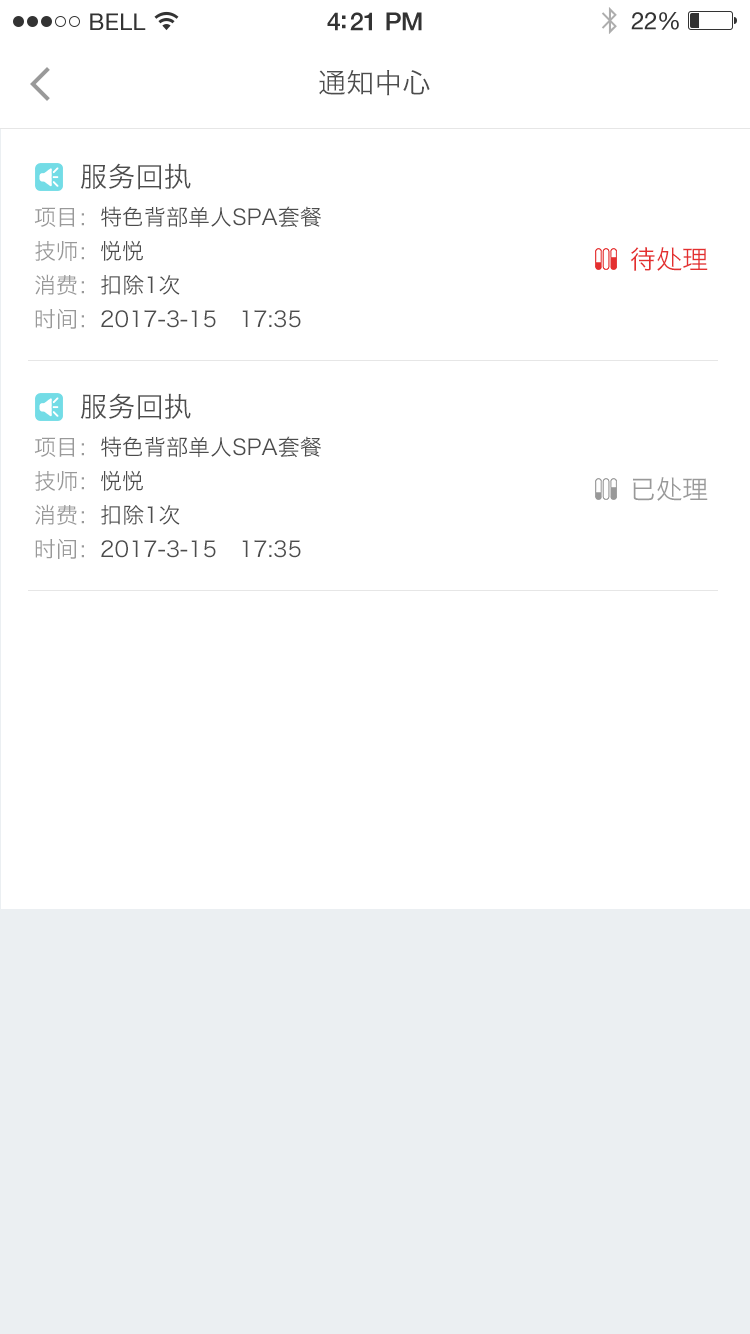
<style>
.page{position:relative;width:750px;height:1334px;background:#ffffff}
.page>*{position:absolute;margin:0}
.t1{font:28px "HiraginoSansGB-W3";color:#4d4d4d}
.t2{font:22px/34px "HiraginoSansGB-W3";color:#4c4c4c}
.t3{font:22px/34px "HiraginoSansGB-W3";color:#999999}
.t4{font:22px "HiraginoSansGB-W3";color:#4c4c4c}
.t5{font:26px "HiraginoSansGB-W3";color:#e42f2f}
.t6{font:26px "HiraginoSansGB-W3";color:#999999}
</style>
<div class="page">
<p class="t1" style="left:319px;top:70px;width:111px;height:26px">通知中心</p>
<p class="t1" style="left:80px;top:163px;width:111px;height:27px">服务回执</p>
<p class="t2" style="left:34px;top:206px;width:287px;height:123px;text-align:justify"><span class="t3">项目：</span><span class="t4">特色背部单人SPA套餐<br></span><span class="t3">技师：</span>悦悦<br><span class="t3">消费：</span>扣除1次<br><span class="t3">时间：</span>2017-3-15   17:35</p>
<p class="t5" style="left:630px;top:247px;width:78px;height:24px">待处理</p>
<p class="t1" style="left:80px;top:393px;width:111px;height:27px">服务回执</p>
<p class="t2" style="left:34px;top:436px;width:287px;height:123px;text-align:justify"><span class="t3">项目：</span><span class="t4">特色背部单人SPA套餐<br></span><span class="t3">技师：</span>悦悦<br><span class="t3">消费：</span>扣除1次<br><span class="t3">时间：</span>2017-3-15   17:35</p>
<p class="t6" style="left:633px;top:477px;width:75px;height:24px">已处理</p>
</div>
